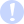
<style>
.page{position:relative;width:24px;height:24px;background:#c7d6fd}
.page>*{position:absolute;margin:0}
.t1{font:26px "PalatinoLinotype-Bold";color:#ffffff;scale:1.2 1}
</style>
<div class="page">
<p class="t1" style="left:10px;top:3px;width:5px;height:18px">!</p>
</div>
